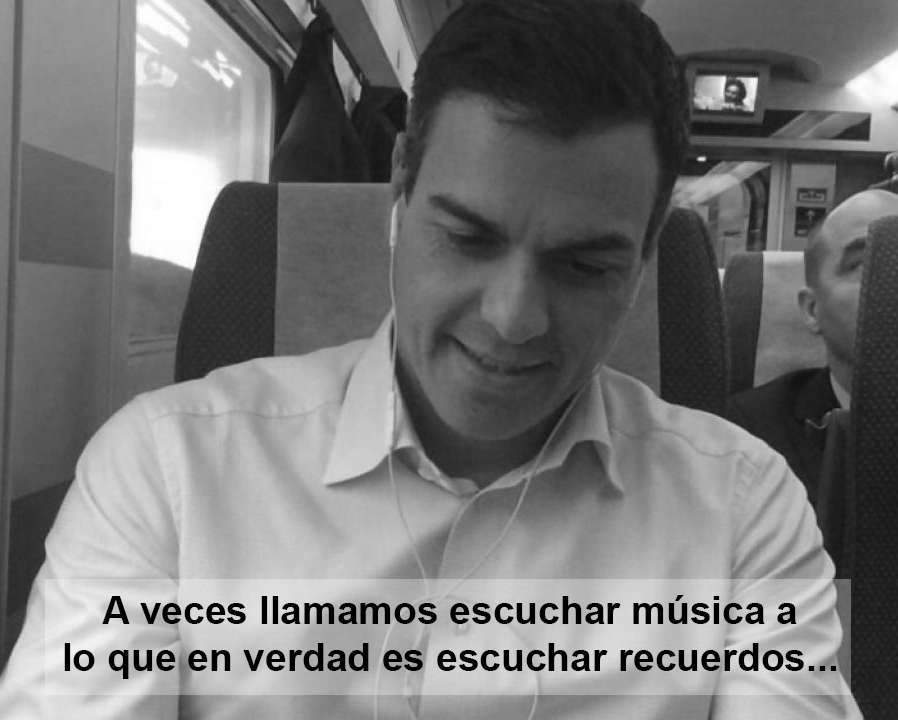
<style>
.page{position:relative;width:898px;height:720px}
.page>*{position:absolute;margin:0}
.t1{font:38.9px "Arial-BoldMT";color:#000000}
</style>
<div class="page">
<p class="t1" style="left:64px;top:595px;width:773px;height:84px;text-align:center">A veces llamamos escuchar música a<br>lo que en verdad es escuchar recuerdos...</p>
</div>
